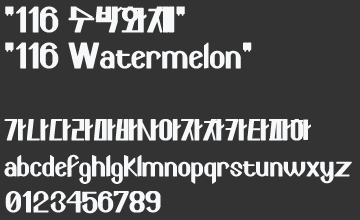
<style>
.page{position:relative;width:360px;height:220px;background:#333333}
.page>*{position:absolute;margin:0}
.t1{font:28px/36px "116watermelon";color:#f7f8fa;font-weight:bold}
.t2{font:34px/36px "116watermelon";color:#f7f8fa;font-weight:bold}
</style>
<div class="page">
<p class="t1" style="left:4px;top:6px;width:348px;height:208px"><span class="t2">“116 수박화채”<br>“116 Watermelon”<br><br></span>가나다라마바사아자차카타파하<br>abcdefghigklmnopqrstunwxyz<br>0123456789</p>
</div>
